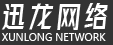
<style>
.page{position:relative;width:113px;height:45px;background:#333333}
.page>*{position:absolute;margin:0}
.t1{font:28.3px "FontquanXinYiGuanHeiTi-Regular";letter-spacing:0.12em;color:#ffffff}
.t2{font:9.7px "MicrosoftYaHei";letter-spacing:0.02em;color:#ffffff;text-transform:uppercase}
</style>
<div class="page">
<p class="t1" style="left:1px;top:3px;width:107px;height:27px">迅龙网络</p>
<p class="t2" style="left:1px;top:33px;width:105px;height:8px">Xunlong network</p>
</div>
